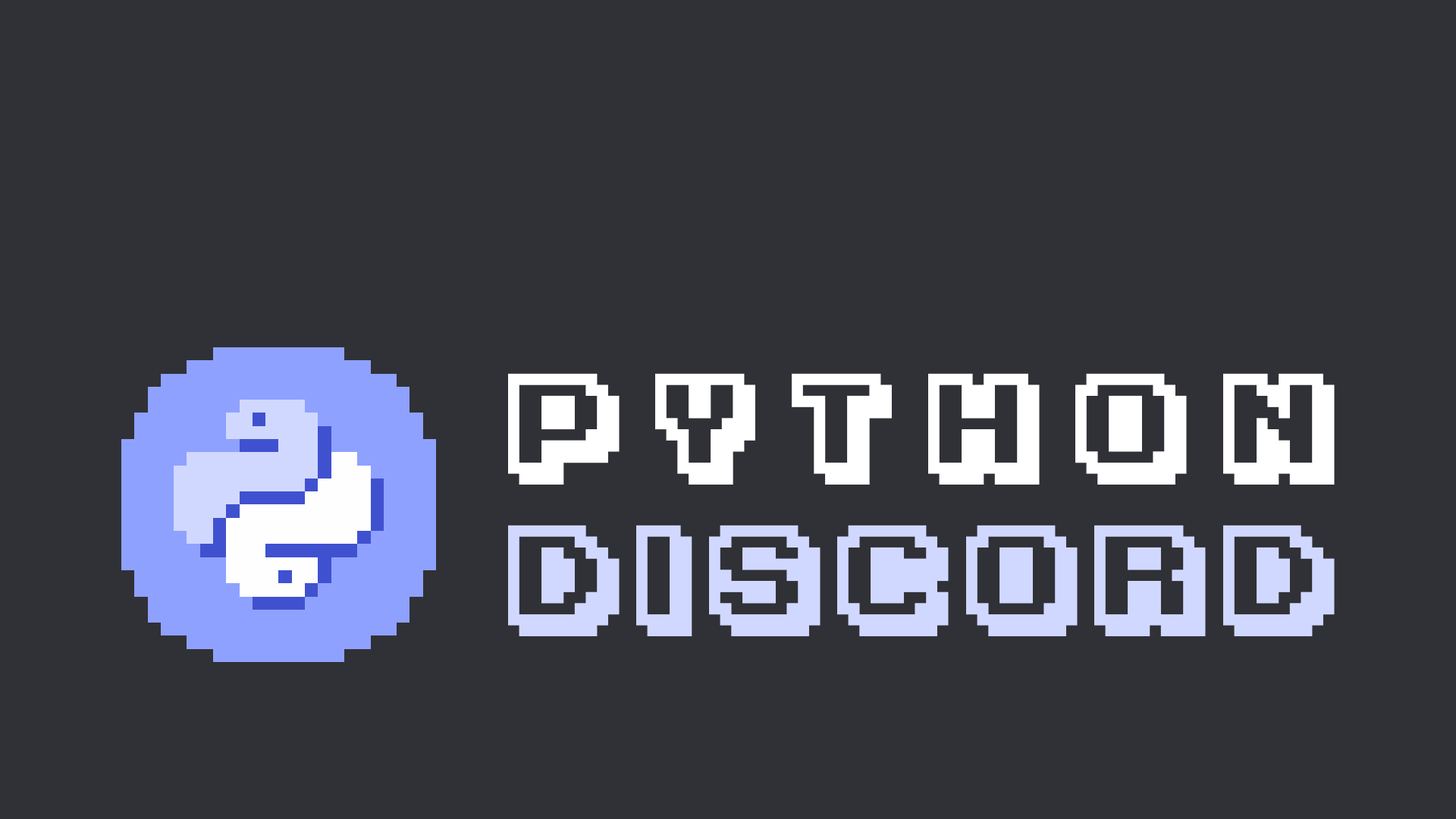
<style>
.page{position:relative;width:1456px;height:819px;background:#303136}
.page>*{position:absolute;margin:0}
.t1{font:113.7px/151.7px "KarmaticArcade";letter-spacing:0.25em;color:#d1d8ff}
.t2{font:113.7px/151.7px "KarmaticArcade";letter-spacing:0.417em;color:#ffffff}
</style>
<div class="page">
<p class="t1" style="left:508px;top:373px;width:827px;height:263px;text-align:center"><span class="t2">PYTHON<br></span>DISCORD</p>
</div>
